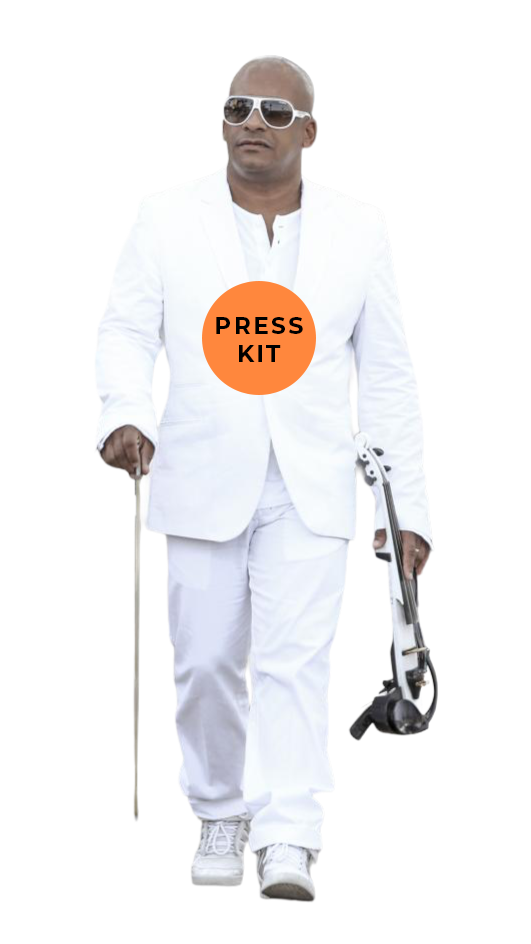
<style>
.page{position:relative;width:531px;height:944px;background:#ffffff}
.page>*{position:absolute;margin:0}
.t1{font:23.3px "Montserrat-Bold";letter-spacing:0.1em;color:#000000}
</style>
<div class="page">
<p class="t1" style="left:216px;top:317px;width:87px;height:45px;text-align:center">PRESS<br>KIT</p>
</div>
